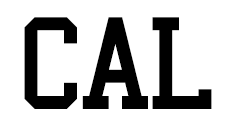
<style>
.page{position:relative;width:230px;height:128px;background:#ffffff}
.page>*{position:absolute;margin:0}
.t1{font:134.3px "College";letter-spacing:-0.06em;color:#000000}
</style>
<div class="page">
<p class="t1" style="left:24px;top:17px;width:188px;height:92px">CAL</p>
</div>
